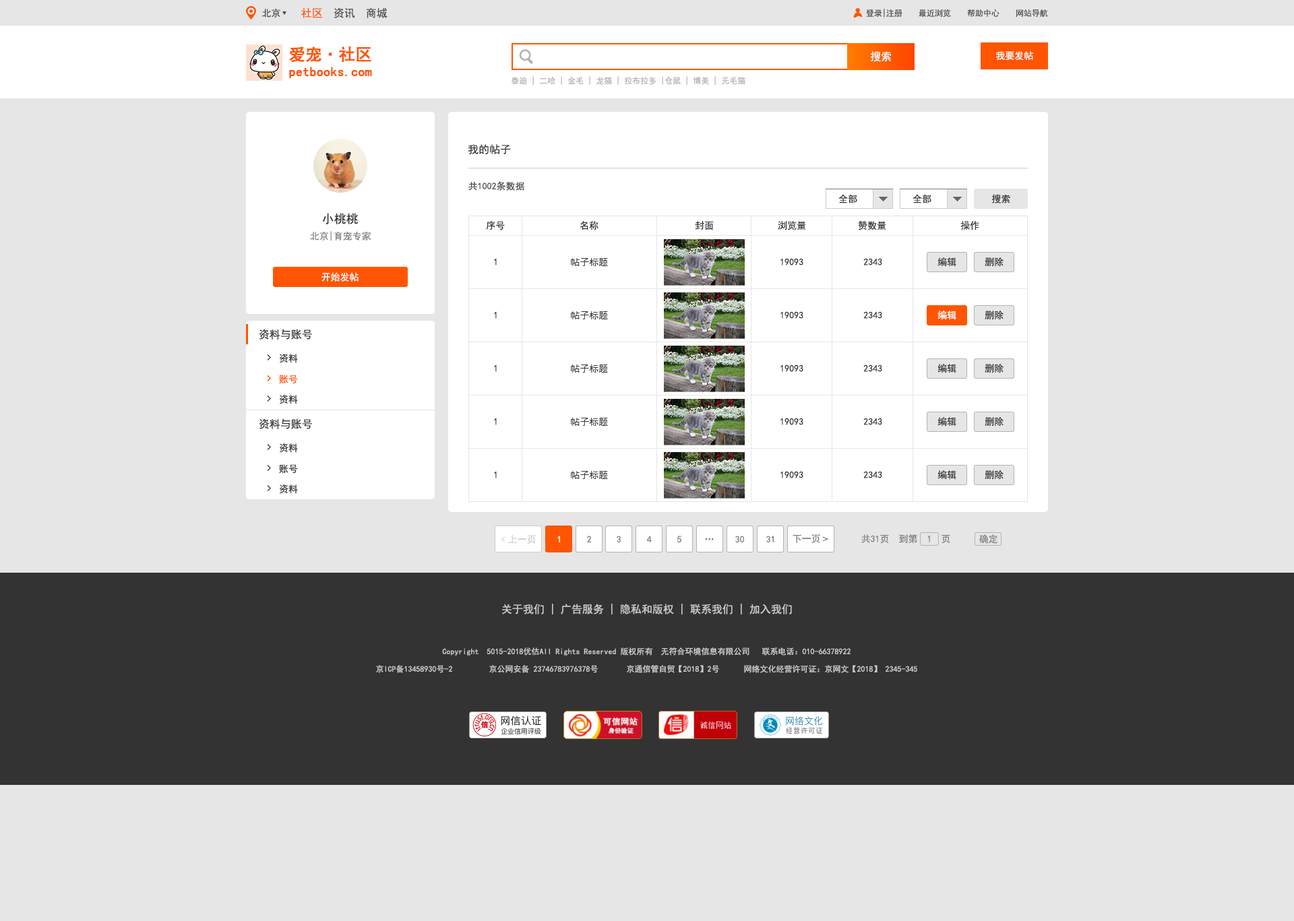
<style>
.page{position:relative;width:1294px;height:921px;background:#e6e6e6}
.page>*{position:absolute;margin:0}
.t1{font:9.4px "SimHei";color:#4d4d4d}
.t2{font:10.8px "SimHei";color:#4d4d4d}
.t3{font:10.8px "SimHei";color:#ff5500}
.t4{font:8.1px "SimHei";color:#4d4d4d}
.t5{font:13.1px/16.2px "SimHei";color:#ff5500;font-weight:bold}
.t6{font:16.2px/16.2px "SimHei";color:#ff5500;font-weight:bold}
.t7{font:10.8px "SimHei";color:#ffffff}
.t8{font:9.4px "SimHei";color:#ffffff}
.t9{font:8.1px "SimHei";color:#b3b3b3}
.t10{font:10.8px "SimHei";color:#333333}
.t11{font:9.4px "SimHei";color:#333333}
.t12{font:12.1px "SimHei";color:#333333}
.t13{font:9.4px "SimHei";color:#808080}
.t14{font:9.4px "SimHei";color:#fe5500}
.t15{font:9.4px "SimHei";color:#cccccc}
.t16{font:9.4px "SimHei";color:#fefefe}
.t17{font:9.4px "AdobeHeitiStd-Regular";color:#808080}
.t18{font:10.8px "SimHei";color:#cccccc}
.t19{font:8.1px/17.5px "SimHei";color:#cccccc}
</style>
<div class="page">
<p class="t1" style="left:262px;top:8px;width:18px;height:10px">北京</p>
<p class="t2" style="left:301px;top:7px;width:87px;height:11px"><span class="t3">社区  </span>资讯  商城</p>
<p class="t4" style="left:866px;top:9px;width:182px;height:9px">登录|注册    最近浏览    帮助中心    网站导航</p>
<p class="t5" style="left:289px;top:47px;width:83px;height:31px"><span class="t6">爱宠·社区<br></span>petbooks.com</p>
<p class="t7" style="left:870px;top:51px;width:22px;height:11px">搜索</p>
<p class="t8" style="left:996px;top:51px;width:37px;height:10px">我要发帖</p>
<p class="t9" style="left:512px;top:76px;width:233px;height:9px">泰迪 | 二哈 | 金毛 | 龙猫 | 拉布拉多 |仓鼠 | 博美 | 无毛猫</p>
<p class="t10" style="left:468px;top:144px;width:43px;height:10px">我的帖子</p>
<p class="t1" style="left:468px;top:181px;width:56px;height:10px">共1002条数据</p>
<p class="t11" style="left:838px;top:194px;width:19px;height:10px">全部</p>
<p class="t11" style="left:913px;top:194px;width:19px;height:10px">全部</p>
<p class="t11" style="left:992px;top:194px;width:18px;height:10px">搜索</p>
<p class="t12" style="left:323px;top:213px;width:35px;height:11px">小桃桃</p>
<p class="t11" style="left:486px;top:221px;width:19px;height:9px">序号</p>
<p class="t11" style="left:580px;top:221px;width:19px;height:10px">名称</p>
<p class="t11" style="left:695px;top:221px;width:19px;height:9px">封面</p>
<p class="t11" style="left:778px;top:221px;width:28px;height:10px">浏览量</p>
<p class="t11" style="left:858px;top:221px;width:28px;height:10px">赞数量</p>
<p class="t11" style="left:960px;top:221px;width:19px;height:10px">操作</p>
<p class="t13" style="left:310px;top:231px;width:61px;height:10px">北京|育宠专家</p>
<p class="t11" style="left:938px;top:257px;width:18px;height:10px">编辑</p>
<p class="t11" style="left:985px;top:257px;width:19px;height:10px">删除</p>
<p class="t11" style="left:494px;top:258px;width:3px;height:8px">1</p>
<p class="t11" style="left:571px;top:258px;width:37px;height:8px">帖子标题</p>
<p class="t11" style="left:781px;top:258px;width:22px;height:8px">19093</p>
<p class="t11" style="left:863px;top:258px;width:19px;height:8px">2343</p>
<p class="t8" style="left:322px;top:272px;width:37px;height:10px">开始发帖</p>
<p class="t11" style="left:494px;top:311px;width:3px;height:8px">1</p>
<p class="t11" style="left:571px;top:311px;width:37px;height:8px">帖子标题</p>
<p class="t11" style="left:781px;top:311px;width:22px;height:8px">19093</p>
<p class="t11" style="left:863px;top:311px;width:19px;height:8px">2343</p>
<p class="t8" style="left:938px;top:311px;width:18px;height:9px">编辑</p>
<p class="t11" style="left:985px;top:311px;width:19px;height:9px">删除</p>
<p class="t10" style="left:259px;top:329px;width:53px;height:11px">资料与账号</p>
<p class="t11" style="left:280px;top:354px;width:18px;height:9px">资料</p>
<p class="t11" style="left:494px;top:365px;width:3px;height:7px">1</p>
<p class="t11" style="left:571px;top:365px;width:37px;height:8px">帖子标题</p>
<p class="t11" style="left:781px;top:365px;width:22px;height:7px">19093</p>
<p class="t11" style="left:863px;top:365px;width:19px;height:7px">2343</p>
<p class="t11" style="left:938px;top:364px;width:18px;height:9px">编辑</p>
<p class="t11" style="left:985px;top:364px;width:19px;height:9px">删除</p>
<p class="t14" style="left:279px;top:375px;width:19px;height:9px">账号</p>
<p class="t11" style="left:280px;top:395px;width:18px;height:9px">资料</p>
<p class="t10" style="left:259px;top:419px;width:53px;height:10px">资料与账号</p>
<p class="t11" style="left:494px;top:418px;width:3px;height:7px">1</p>
<p class="t11" style="left:571px;top:418px;width:37px;height:8px">帖子标题</p>
<p class="t11" style="left:781px;top:418px;width:22px;height:7px">19093</p>
<p class="t11" style="left:863px;top:418px;width:19px;height:7px">2343</p>
<p class="t11" style="left:938px;top:417px;width:18px;height:10px">编辑</p>
<p class="t11" style="left:985px;top:417px;width:19px;height:10px">删除</p>
<p class="t11" style="left:280px;top:444px;width:18px;height:9px">资料</p>
<p class="t11" style="left:279px;top:464px;width:19px;height:10px">账号</p>
<p class="t11" style="left:494px;top:471px;width:3px;height:8px">1</p>
<p class="t11" style="left:571px;top:471px;width:37px;height:8px">帖子标题</p>
<p class="t11" style="left:781px;top:471px;width:22px;height:8px">19093</p>
<p class="t11" style="left:863px;top:471px;width:19px;height:8px">2343</p>
<p class="t11" style="left:938px;top:470px;width:18px;height:10px">编辑</p>
<p class="t11" style="left:985px;top:470px;width:19px;height:10px">删除</p>
<p class="t11" style="left:280px;top:485px;width:18px;height:9px">资料</p>
<p class="t15" style="left:501px;top:535px;width:35px;height:9px">﹤上一页</p>
<p class="t16" style="left:557px;top:536px;width:3px;height:7px">1</p>
<p class="t13" style="left:587px;top:536px;width:4px;height:7px">2</p>
<p class="t13" style="left:617px;top:536px;width:4px;height:7px">3</p>
<p class="t13" style="left:646px;top:536px;width:6px;height:7px">4</p>
<p class="t13" style="left:677px;top:536px;width:4px;height:7px">5</p>
<p class="t13" style="left:705px;top:539px;width:9px;height:2px">…</p>
<p class="t13" style="left:735px;top:536px;width:9px;height:7px">30</p>
<p class="t13" style="left:766px;top:536px;width:8px;height:7px">31</p>
<p class="t13" style="left:793px;top:535px;width:36px;height:8px">下一页<span class="t17">﹥</span></p>
<p class="t13" style="left:861px;top:535px;width:89px;height:9px">共31页  到第  1  页</p>
<p class="t13" style="left:979px;top:535px;width:19px;height:9px">确定</p>
<p class="t18" style="left:502px;top:604px;width:290px;height:11px">关于我们 | 广告服务 | 隐私和版权 | 联系我们 | 加入我们</p>
<p class="t19" style="left:376px;top:648px;width:541px;height:25px;text-align:center">Copyright  5015-2018优估All Rights Reserved 版权所有  无符合环境信息有限公司   联系电话：010-66378922<br>京ICP备13458930号-2         京公网安备 23746783976378号       京通信管自贸【2018】2号      网络文化经营许可证：京网文【2018】 2345-345</p>
</div>
